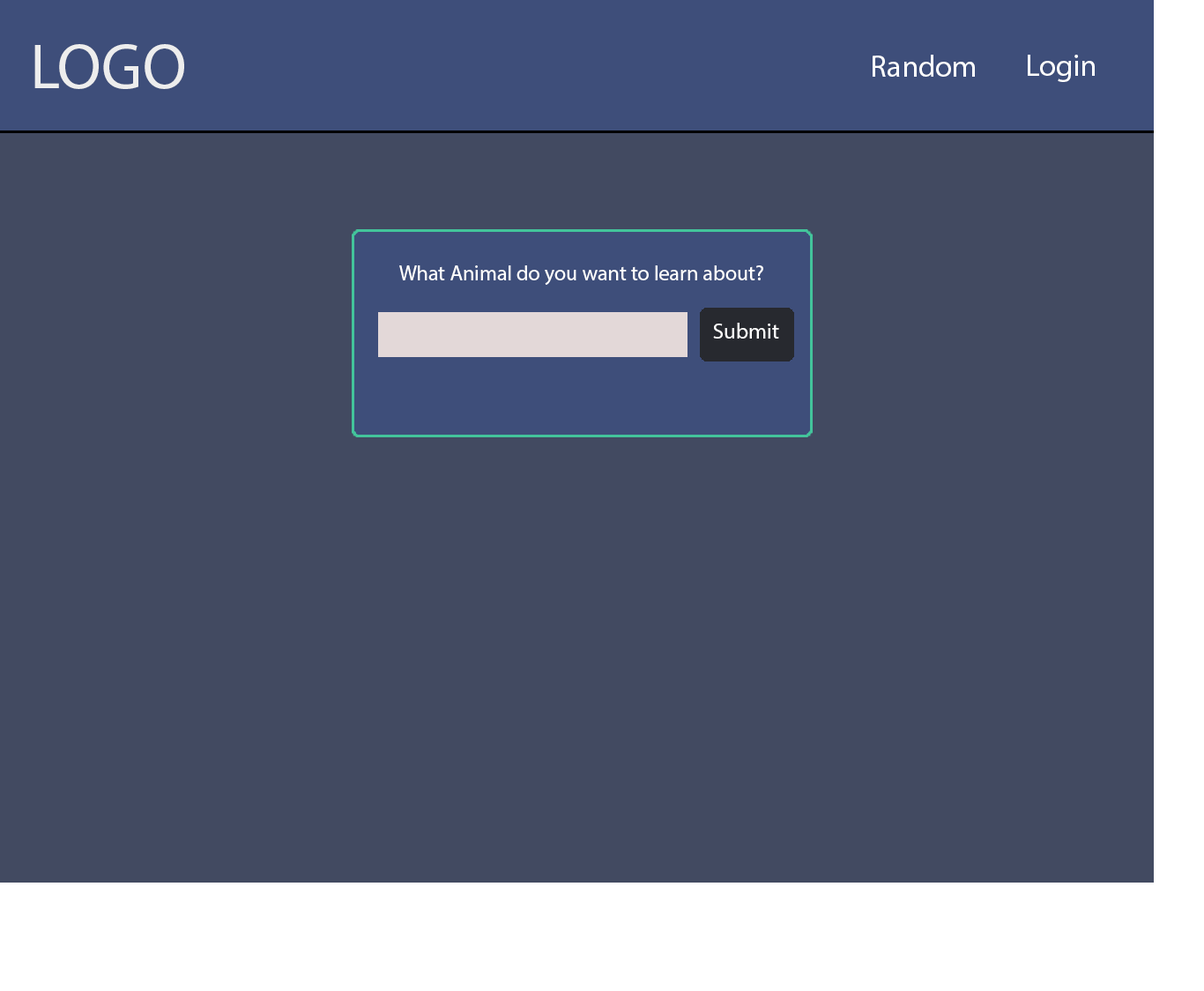
<style>
.page{position:relative;width:1204px;height:991px;background:#424a61}
.page>*{position:absolute;margin:0}
.t1{font:63.5px "MyriadPro-Regular";color:#ededed}
.t2{font:30.3px "MyriadPro-Regular";color:#ffffff}
.t3{font:21.2px "MyriadPro-Regular";color:#ffffff}
.t4{font:22.1px "MyriadPro-Regular";color:#ffffff}
</style>
<div class="page">
<p class="t1" style="left:34px;top:44px;width:150px;height:45px">LOGO</p>
<p class="t2" style="left:872px;top:55px;width:103px;height:22px">Random</p>
<p class="t2" style="left:1028px;top:55px;width:67px;height:27px">Login</p>
<p class="t3" style="left:399px;top:265px;width:364px;height:20px">What Animal do you want to learn about?</p>
<p class="t4" style="left:713px;top:323px;width:66px;height:15px">Submit</p>
</div>
